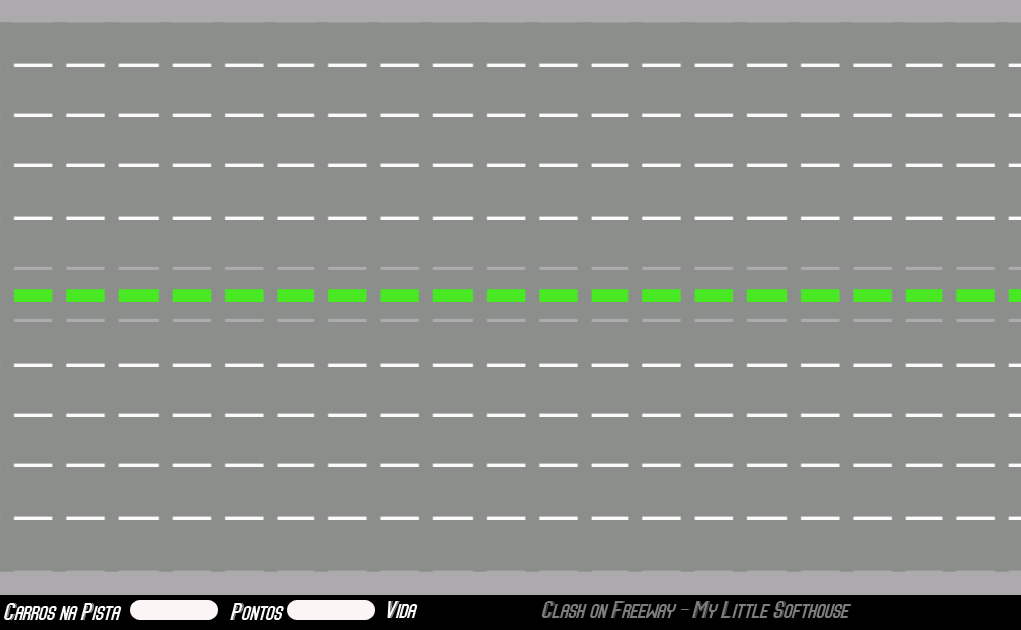
<style>
.page{position:relative;width:1021px;height:630px;background:#8c8e8c}
.page>*{position:absolute;margin:0}
.t1{font:20px "Speed+";color:#fbf8f8}
.t2{font:20px "Speed+";color:#7e7c7c}
</style>
<div class="page">
<p class="t1" style="left:4px;top:603px;width:118px;height:17px">Carros na Pista</p>
<p class="t1" style="left:230px;top:603px;width:54px;height:17px">Pontos</p>
<p class="t1" style="left:387px;top:601px;width:31px;height:17px">Vida</p>
<p class="t2" style="left:541px;top:601px;width:311px;height:17px">Clash on Freeway - My Little Softhouse</p>
</div>
